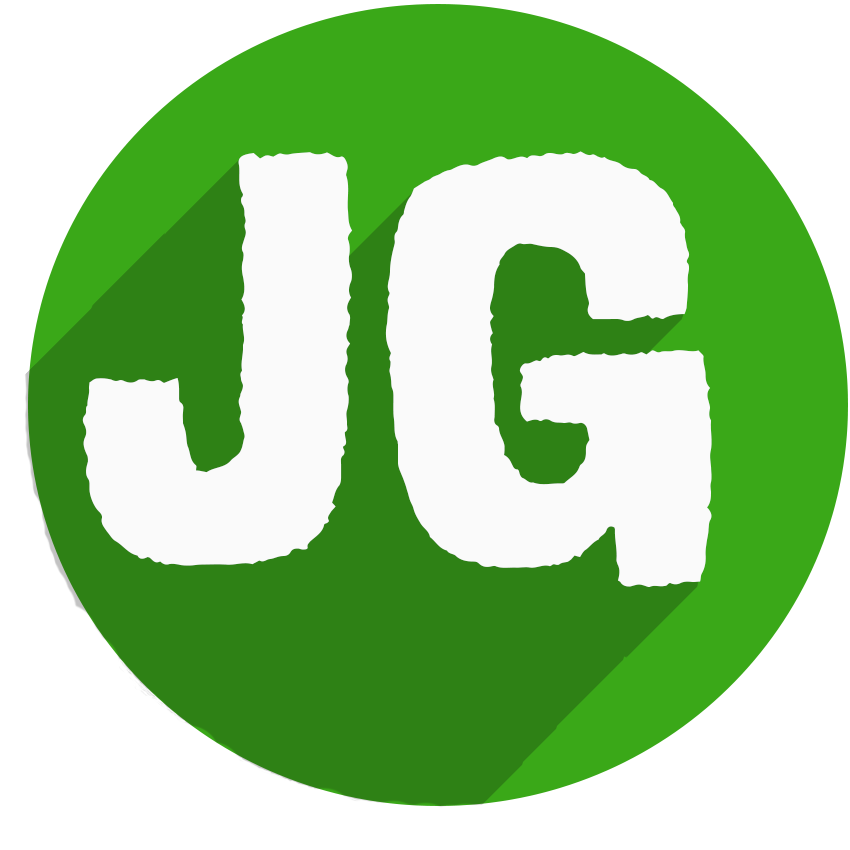
<style>
.page{position:relative;width:850px;height:850px;background:#ffffff}
.page>*{position:absolute;margin:0}
.t1{font:500px "GratefulDEMO-Regular";color:#fafafa}
</style>
<div class="page">
<p class="t1" style="left:82px;top:151px;width:630px;height:436px">JG</p>
</div>
